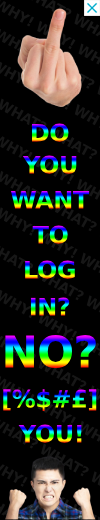
<style>
.page{position:relative;width:100px;height:520px;background:#000000}
.page>*{position:absolute;margin:0}
.t1{font:24px "MontserratRoman-ExtraBold";letter-spacing:-0.02em;text-transform:uppercase}
.t2{font:43.7px "MontserratRoman-ExtraBold";letter-spacing:-0.02em;text-transform:uppercase}
</style>
<div class="page">
<p class="t1" style="left:32px;top:123px;width:37px;height:19px">do</p>
<p class="t1" style="left:22px;top:155px;width:55px;height:19px">you</p>
<p class="t1" style="left:10px;top:190px;width:80px;height:19px">want</p>
<p class="t1" style="left:32px;top:225px;width:36px;height:19px">to</p>
<p class="t1" style="left:25px;top:260px;width:50px;height:19px">log</p>
<p class="t1" style="left:30px;top:297px;width:40px;height:19px">in?</p>
<p class="t2" style="left:5px;top:335px;width:91px;height:33px">no?</p>
<p class="t1" style="left:3px;top:389px;width:94px;height:22px">[%$#£]</p>
<p class="t1" style="left:18px;top:424px;width:64px;height:19px">you!</p>
</div>
